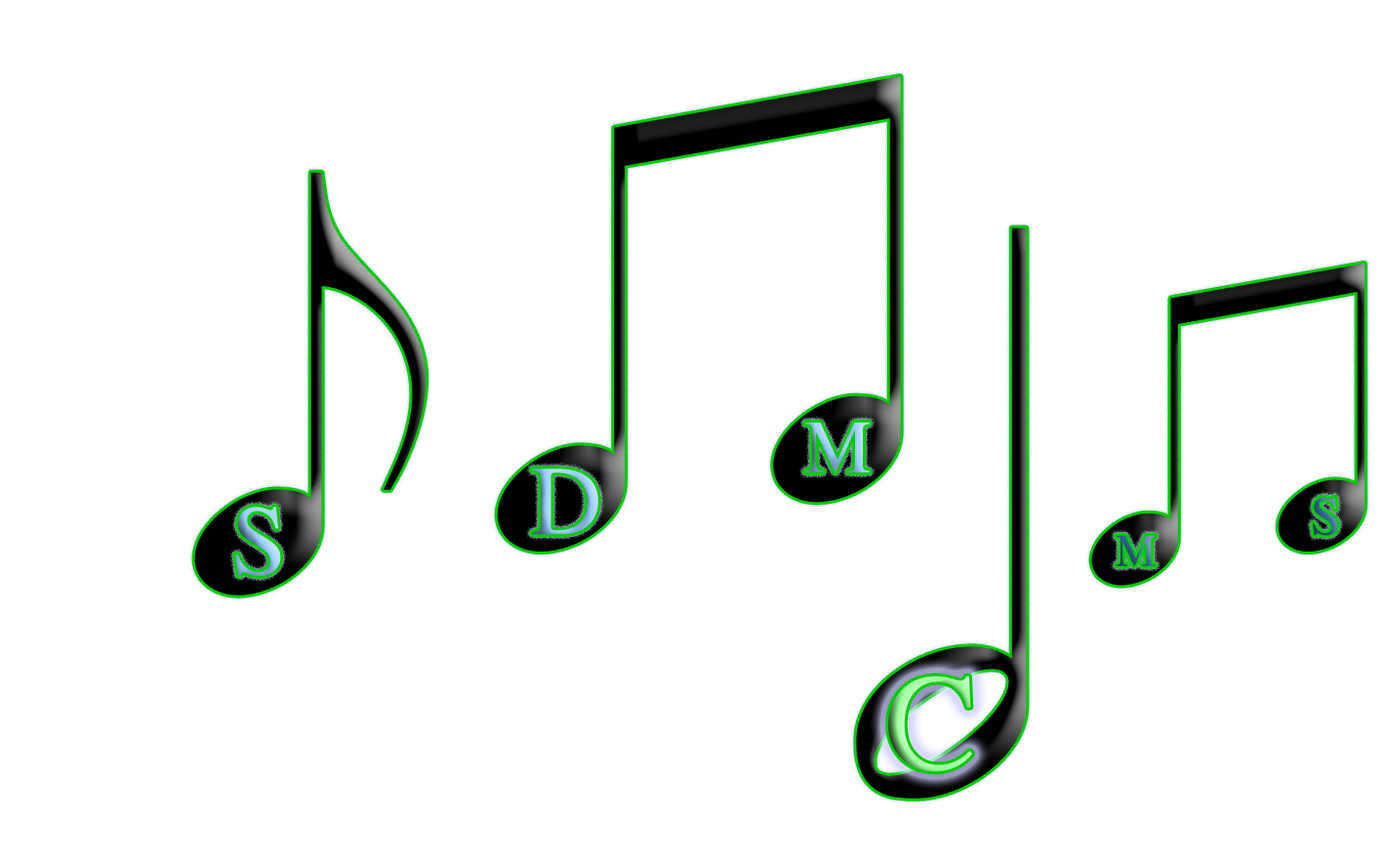
<style>
.page{position:relative;width:1386px;height:860px;background:#ffffff}
.page>*{position:absolute;margin:0}
.t1{font:75.2px "Times-Roman"}
.t2{font:98.4px "Times-Roman"}
.t3{font:54.7px "Times-Roman"}
.t4{font:99.9px "Times-Roman"}
.t5{font:45.3px "Times-Roman"}
</style>
<div class="page">
<p class="t1" style="left:805px;top:422px;width:65px;height:51px">M</p>
<p class="t2" style="left:532px;top:469px;width:66px;height:66px">D</p>
<p class="t3" style="left:1312px;top:497px;width:27px;height:39px">S</p>
<p class="t4" style="left:235px;top:507px;width:46px;height:69px">S</p>
<p class="t5" style="left:1116px;top:535px;width:40px;height:31px">M</p>
</div>
